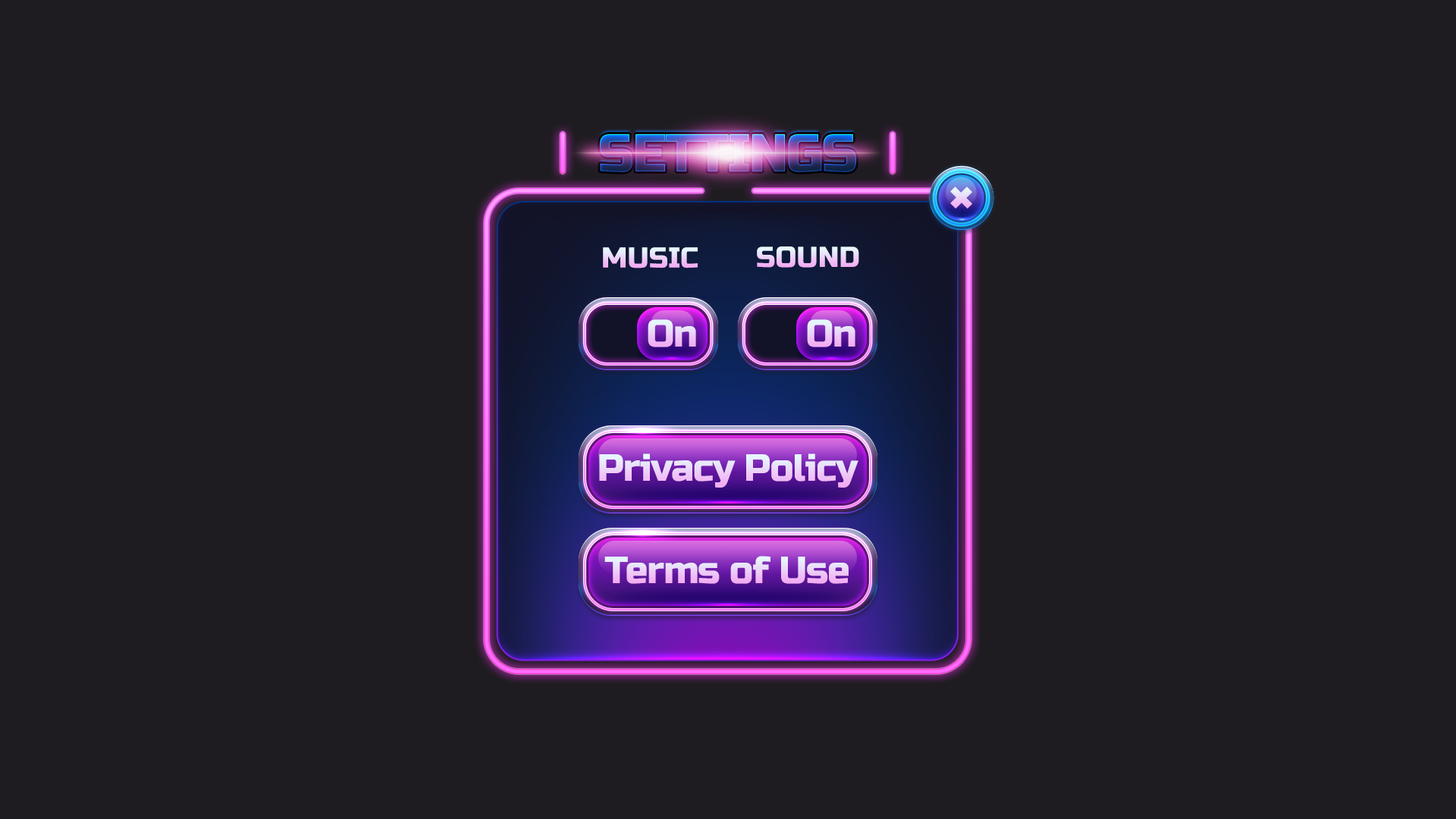
<style>
.page{position:relative;width:1456px;height:819px;background:#1e1c20}
.page>*{position:absolute;margin:0}
.t1{font:53.1px "RussoOne-Regular";letter-spacing:-0.025em;text-transform:uppercase}
.t2{font:28.8px "RussoOne-Regular";text-transform:uppercase}
.t3{font:37.9px "RussoOne-Regular";letter-spacing:-0.025em}
</style>
<div class="page">
<p class="t1" style="left:600px;top:134px;width:256px;height:38px">Settings</p>
<p class="t2" style="left:603px;top:247px;width:95px;height:21px">music</p>
<p class="t2" style="left:757px;top:246px;width:102px;height:22px">sound</p>
<p class="t3" style="left:648px;top:319px;width:48px;height:28px">On</p>
<p class="t3" style="left:807px;top:319px;width:48px;height:28px">On</p>
<p class="t3" style="left:599px;top:453px;width:259px;height:35px">Privacy Policy</p>
<p class="t3" style="left:604px;top:556px;width:245px;height:28px">Terms of Use</p>
</div>
